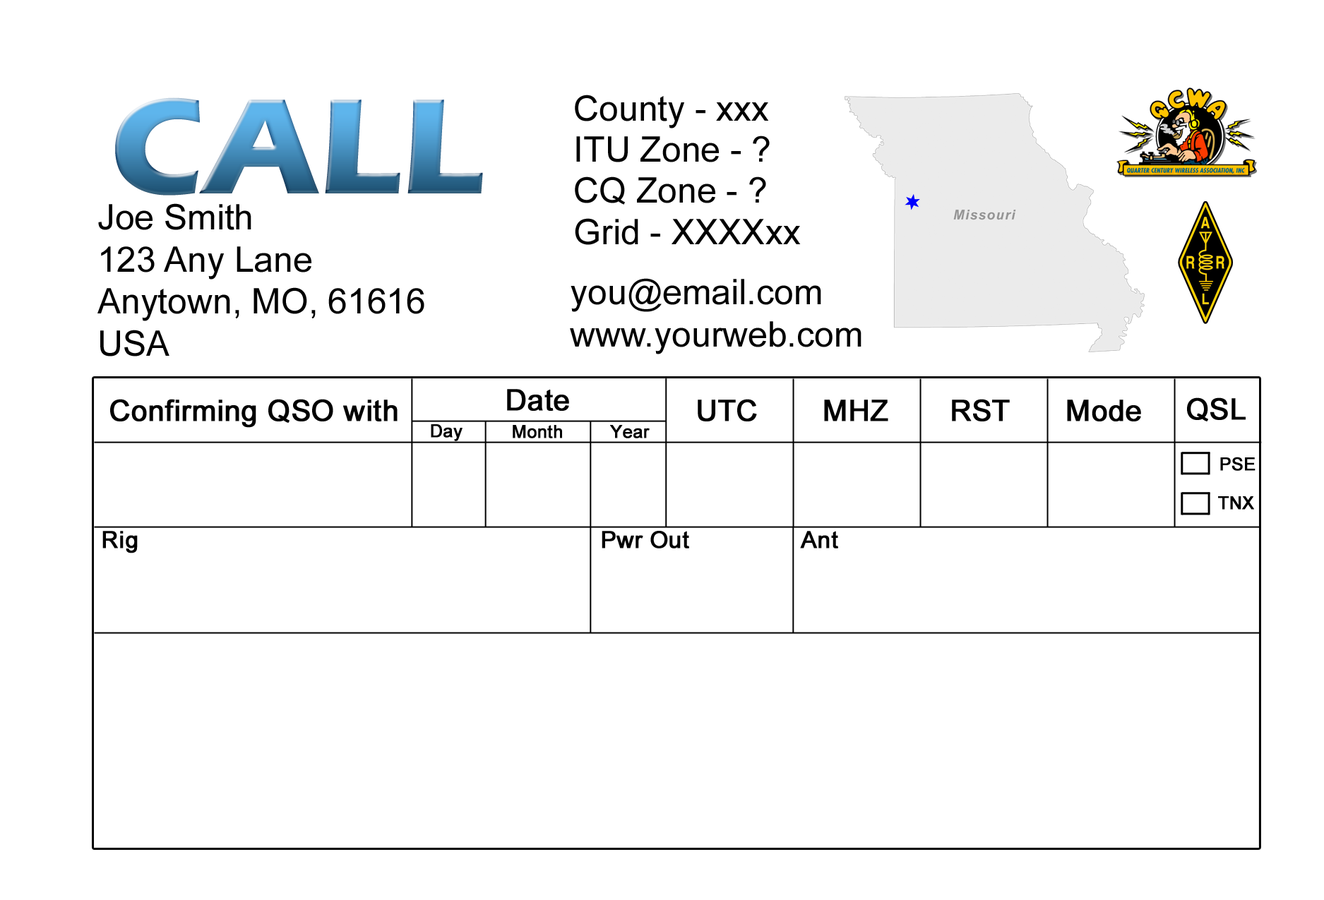
<style>
.page{position:relative;width:1324px;height:900px;background:#ffffff}
.page>*{position:absolute;margin:0}
.t1{font:140.7px "ErasITC-Bold"}
.t2{font:35.2px/41px "ArialMT";color:#000000}
.t3{font:35.2px "ArialMT";color:#000000}
.t4{font:29.3px "ArialMT";color:#000000;font-weight:bold}
.t5{font:17.6px "ArialMT";color:#000000;font-weight:bold}
.t6{font:23.5px "ArialMT";color:#000000;font-weight:bold}
</style>
<div class="page">
<p class="t1" style="left:115px;top:97px;width:368px;height:99px">CALL</p>
<p class="t2" style="left:575px;top:95px;width:226px;height:150px">County - xxx<br>ITU Zone - ?<br>CQ Zone - ?<br>Grid - XXXXxx</p>
<p class="t3" style="left:97px;top:203px;width:327px;height:154px">Joe Smith<br>123 Any Lane<br>Anytown, MO, 61616<br>USA</p>
<p class="t3" style="left:570px;top:278px;width:292px;height:77px">you@email.com<br>www.yourweb.com</p>
<p class="t4" style="left:507px;top:389px;width:62px;height:22px">Date</p>
<p class="t4" style="left:110px;top:399px;width:288px;height:29px">Confirming QSO with</p>
<p class="t4" style="left:698px;top:399px;width:59px;height:23px">UTC</p>
<p class="t4" style="left:824px;top:400px;width:64px;height:22px">MHZ</p>
<p class="t4" style="left:952px;top:399px;width:58px;height:23px">RST</p>
<p class="t4" style="left:1067px;top:400px;width:74px;height:22px">Mode</p>
<p class="t4" style="left:1187px;top:398px;width:59px;height:24px">QSL</p>
<p class="t5" style="left:431px;top:424px;width:32px;height:17px">Day</p>
<p class="t5" style="left:513px;top:425px;width:49px;height:14px">Month</p>
<p class="t5" style="left:610px;top:425px;width:40px;height:14px">Year</p>
<p class="t5" style="left:1220px;top:457px;width:36px;height:14px">PSE</p>
<p class="t5" style="left:1218px;top:496px;width:36px;height:14px">TNX</p>
<p class="t6" style="left:102px;top:531px;width:36px;height:23px">Rig</p>
<p class="t6" style="left:602px;top:531px;width:87px;height:18px">Pwr Out</p>
<p class="t6" style="left:800px;top:531px;width:38px;height:18px">Ant</p>
</div>
